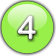
<style>
.page{position:relative;width:56px;height:56px;background:#98ef4a}
.page>*{position:absolute;margin:0}
.t1{font:32px "ArialRoundedMTBold";color:#ffffff}
</style>
<div class="page">
<p class="t1" style="left:18px;top:15px;width:18px;height:25px">4</p>
</div>
